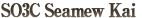
<style>
.page{position:relative;width:142px;height:18px;background:#ffffff}
.page>*{position:absolute;margin:0}
.t1{font:18px "RyuminPro-ExBold";letter-spacing:-0.06em;color:#4a3f32;font-weight:bold;scale:0.9 1}
</style>
<div class="page">
<p class="t1" style="left:1px;top:3px;width:135px;height:15px">SO3C Seamew Kai</p>
</div>
